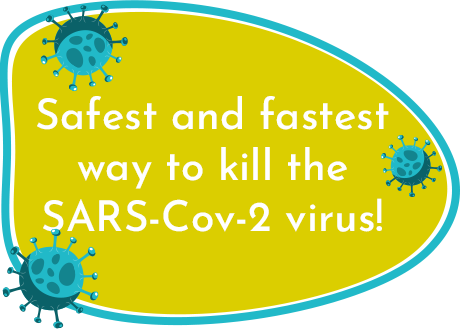
<style>
.page{position:relative;width:463px;height:334px;background:#dbce00}
.page>*{position:absolute;margin:0}
.t1{font:42.5px "JosefinSans-Medium";color:#ffffff}
</style>
<div class="page">
<p class="t1" style="left:37px;top:96px;width:352px;height:136px;text-align:center">Safest and fastest<br>way to kill the<br>SARS-Cov-2 virus!</p>
</div>
